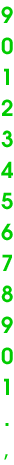
<style>
.page{position:relative;width:14px;height:465px;background:#ffffff}
.page>*{position:absolute;margin:0}
.t1{font:22px "AvantGarde-Demi";letter-spacing:0.2em;color:#00cc00}
.t2{font:22px "MyriadPro-Regular";letter-spacing:0.2em;color:#00cc00}
</style>
<div class="page">
<p class="t1" style="left:1px;top:6px;width:12px;height:17px">9</p>
<p class="t1" style="left:1px;top:37px;width:12px;height:18px">0</p>
<p class="t1" style="left:1px;top:37px;width:12px;height:18px">0</p>
<p class="t1" style="left:4px;top:68px;width:5px;height:17px">1</p>
<p class="t1" style="left:4px;top:68px;width:5px;height:17px">1</p>
<p class="t1" style="left:1px;top:99px;width:12px;height:17px">2</p>
<p class="t1" style="left:1px;top:130px;width:12px;height:18px">3</p>
<p class="t1" style="left:1px;top:161px;width:12px;height:17px">4</p>
<p class="t1" style="left:1px;top:192px;width:12px;height:18px">5</p>
<p class="t1" style="left:1px;top:223px;width:12px;height:18px">6</p>
<p class="t1" style="left:2px;top:254px;width:10px;height:17px">7</p>
<p class="t1" style="left:1px;top:285px;width:12px;height:18px">8</p>
<p class="t1" style="left:1px;top:316px;width:12px;height:17px">9</p>
<p class="t1" style="left:1px;top:347px;width:12px;height:18px">0</p>
<p class="t1" style="left:4px;top:378px;width:5px;height:17px">1</p>
<p class="t1" style="left:5px;top:423px;width:4px;height:3px">.</p>
<p class="t2" style="left:4px;top:454px;width:4px;height:6px">,</p>
</div>
